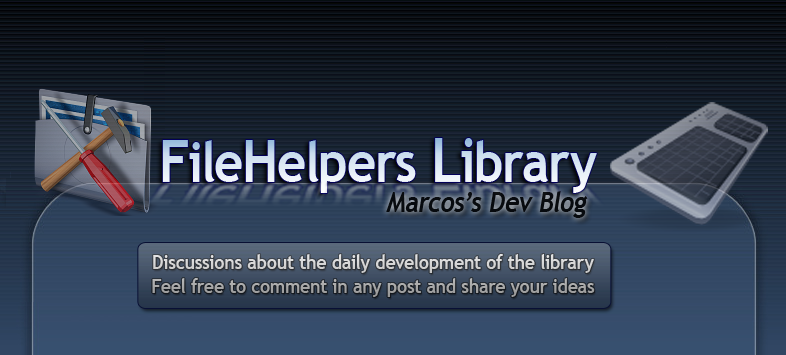
<style>
.page{position:relative;width:786px;height:355px}
.page>*{position:absolute;margin:0}
.t1{font:56.3px "TrebuchetMS-Bold";letter-spacing:-0.01em;color:#dbe8f3;scale:0.9 1}
.t2{font:59.1px "TrebuchetMS-Bold";letter-spacing:-0.01em;color:#dbe8f3;scale:0.9 1}
.t3{font:62px "TrebuchetMS-Bold";letter-spacing:-0.01em;color:#dbe8f3;scale:0.9 1}
.t4{font:28px "TrebuchetMS-Bold";letter-spacing:-0.01em;color:#000000;font-style:italic;scale:0.9 1}
.t5{font:20px "TrebuchetMS-Bold";letter-spacing:-0.01em;scale:0.9 1}
</style>
<div class="page">
<p class="t1" style="left:162px;top:138px;width:435px;height:55px"><span class="t2">F</span>ile<span class="t2">H</span>elpers <span class="t3">L</span><span class="t2">i</span>brary</p>
<p class="t4" style="left:386px;top:191px;width:202px;height:27px;opacity:0.84">Marcos’s Dev Blog</p>
<p class="t5" style="left:152px;top:254px;width:443px;height:43px;text-align:center">Discussions about the daily development of the library<br>Feel free to comment in any post and share your ideas</p>
</div>
